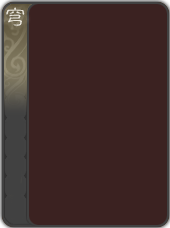
<style>
.page{position:relative;width:170px;height:228px;background:#3b2221}
.page>*{position:absolute;margin:0}
.t1{font:24px "FZLBJW--GB1-0";letter-spacing:0.075em;color:#eae6dc}
</style>
<div class="page">
<p class="t1" style="left:6px;top:7px;width:19px;height:19px">穹</p>
</div>
